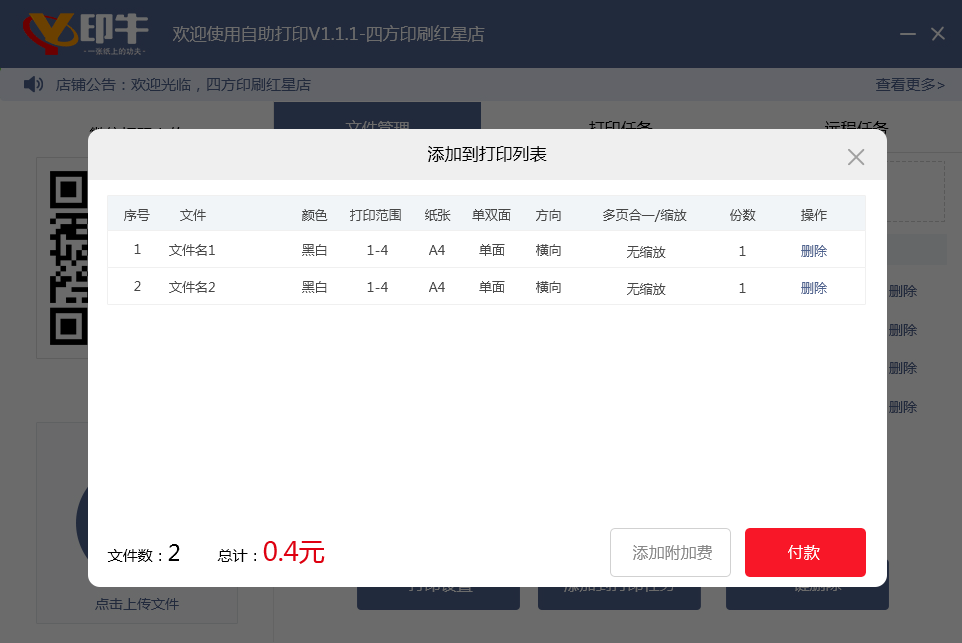
<style>
.page{position:relative;width:962px;height:643px;background:#ffffff}
.page>*{position:absolute;margin:0}
.t1{font:17px "MicrosoftYaHei";color:#000000}
.t2{font:13px "MicrosoftYaHei";color:#474747}
.t3{font:13px "MicrosoftYaHei";color:#4f638f}
.t4{font:15px "MicrosoftYaHei";color:#000000}
.t5{font:22px "MicrosoftYaHei";color:#000000}
.t6{font:26px "MicrosoftYaHei";color:#df0011}
.t7{font:16px "MicrosoftYaHei";color:#888888}
.t8{font:16px "MicrosoftYaHei";color:#ffffff}
</style>
<div class="page">
<p class="t1" style="left:428px;top:146px;width:119px;height:16px">添加到打印列表</p>
<p class="t2" style="left:124px;top:209px;width:26px;height:12px">序号</p>
<p class="t2" style="left:180px;top:209px;width:26px;height:12px">文件</p>
<p class="t2" style="left:302px;top:209px;width:26px;height:12px">颜色</p>
<p class="t2" style="left:350px;top:209px;width:51px;height:12px">打印范围</p>
<p class="t2" style="left:425px;top:209px;width:26px;height:12px">纸张</p>
<p class="t2" style="left:472px;top:209px;width:39px;height:12px">单双面</p>
<p class="t2" style="left:536px;top:209px;width:25px;height:12px">方向</p>
<p class="t2" style="left:603px;top:209px;width:84px;height:13px">多页合一/缩放</p>
<p class="t2" style="left:730px;top:209px;width:26px;height:12px">份数</p>
<p class="t2" style="left:801px;top:209px;width:26px;height:12px">操作</p>
<p class="t2" style="left:134px;top:244px;width:7px;height:10px">1</p>
<p class="t2" style="left:169px;top:244px;width:46px;height:12px">文件名1</p>
<p class="t2" style="left:302px;top:244px;width:25px;height:12px">黑白</p>
<p class="t2" style="left:367px;top:245px;width:21px;height:10px">1-4</p>
<p class="t2" style="left:429px;top:245px;width:16px;height:10px">A4</p>
<p class="t2" style="left:479px;top:244px;width:26px;height:12px">单面</p>
<p class="t2" style="left:536px;top:244px;width:25px;height:12px">横向</p>
<p class="t2" style="left:627px;top:246px;width:39px;height:12px">无缩放</p>
<p class="t2" style="left:739px;top:246px;width:7px;height:10px">1</p>
<p class="t3" style="left:801px;top:245px;width:26px;height:12px">删除</p>
<p class="t2" style="left:134px;top:281px;width:7px;height:10px">2</p>
<p class="t2" style="left:169px;top:281px;width:46px;height:12px">文件名2</p>
<p class="t2" style="left:302px;top:281px;width:25px;height:12px">黑白</p>
<p class="t2" style="left:479px;top:281px;width:26px;height:12px">单面</p>
<p class="t2" style="left:536px;top:281px;width:25px;height:12px">横向</p>
<p class="t2" style="left:367px;top:282px;width:21px;height:10px">1-4</p>
<p class="t2" style="left:429px;top:282px;width:16px;height:10px">A4</p>
<p class="t2" style="left:627px;top:283px;width:39px;height:12px">无缩放</p>
<p class="t2" style="left:739px;top:283px;width:7px;height:10px">1</p>
<p class="t3" style="left:801px;top:282px;width:26px;height:12px">删除</p>
<p class="t4" style="left:107px;top:544px;width:73px;height:18px">文件数：<span class="t5">2</span></p>
<p class="t6" style="left:217px;top:541px;width:108px;height:23px"><span class="t4">总计：</span>0.4元</p>
<p class="t7" style="left:633px;top:545px;width:79px;height:15px">添加附加费</p>
<p class="t8" style="left:788px;top:545px;width:32px;height:15px">付款</p>
</div>
